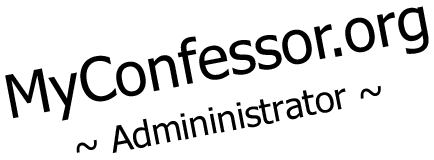
<style>
.page{position:relative;width:434px;height:160px;background:#ffffff}
.page>*{position:absolute;margin:0}
.t1{font:59.8px "Tahoma";color:#000000}
.t2{font:35.9px "Tahoma";color:#000000}
</style>
<div class="page">
<p class="t1" style="left:5px;top:6px;width:424px;height:115px;rotate:-11deg">MyConfessor.org</p>
<p class="t2" style="left:76px;top:85px;width:305px;height:68px;rotate:-11deg">~ Admininistrator ~</p>
</div>
